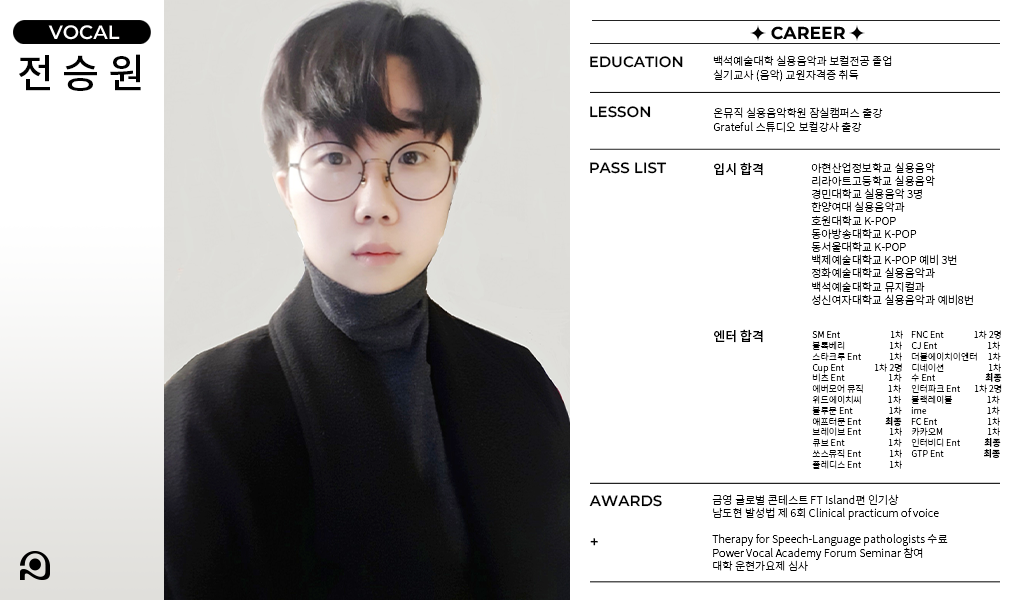
<style>
.page{position:relative;width:1020px;height:600px;background:#ffffff}
.page>*{position:absolute;margin:0}
.t1{font:19.4px "Montserrat-SemiBold";color:#fffefe}
.t2{font:17.3px "Montserrat-Bold";color:#000000}
.t3{font:39.9px "NotoSansKR-Medium";color:#000000}
.t4{font:15px "Montserrat-SemiBold";color:#000000}
.t5{font:11px/14px "NotoSansKR-Light";color:#000000}
.t6{font:13px "NotoSansKR-Medium";color:#000000}
.t7{font:11px "NotoSansKR-Light";color:#000000}
.t8{font:9px "NotoSansKR-Light";color:#000000}
.t9{font:9px "NotoSansKR-Bold";color:#000000}
</style>
<div class="page">
<p class="t1" style="left:48px;top:25px;width:72px;height:15px">VOCAL</p>
<p class="t2" style="left:771px;top:26px;width:74px;height:14px">CAREER</p>
<p class="t3" style="left:19px;top:54px;width:122px;height:37px">전 승 원</p>
<p class="t4" style="left:590px;top:56px;width:93px;height:12px">EDUCATION</p>
<p class="t5" style="left:713px;top:55px;width:179px;height:27px">백석예술대학 실용음악과 보컬전공 졸업<br>실기교사 (음악) 교원자격증 취득</p>
<p class="t4" style="left:590px;top:106px;width:61px;height:12px">LESSON</p>
<p class="t5" style="left:713px;top:107px;width:170px;height:26px">온뮤직 실용음악학원 잠실캠퍼스 출강<br>Grateful 스튜디오 보컬강사 출강</p>
<p class="t4" style="left:590px;top:162px;width:77px;height:12px">PASS LIST</p>
<p class="t6" style="left:714px;top:162px;width:49px;height:14px">입시 합격</p>
<p class="t7" style="left:811px;top:162px;width:162px;height:144px">아현산업정보학교 실용음악<br>리라아트고등학교 실용음악<br>경민대학교 실용음악 3명<br>한양여대 실용음악과<br>호원대학교 K-POP<br>동아방송대학교 K-POP<br>동서울대학교 K-POP<br>백제예술대학교 K-POP 예비 3번<br>정화예술대학교 실용음악과<br>백석예술대학교 뮤지컬과<br>성신여자대학교 실용음악과 예비8번</p>
<p class="t6" style="left:714px;top:329px;width:49px;height:14px">엔터 합격</p>
<p class="t8" style="left:812px;top:330px;width:91px;height:139px">SM Ent                         1차 <br>블록베리                      1차  <br>스타크루 Ent              1차 <br>Cup Ent               1차 2명<br>비츠 Ent                      1차  <br>에버모어 뮤직            1차  위드에이치씨             1차<br>블루문 Ent                  1차<br>애프터문 Ent            <span class="t9">최종 </span>브레이브 Ent              1차<br>큐브 Ent                      1차 <br>쏘스뮤직 Ent              1차<br>플레디스 Ent              1차</p>
<p class="t8" style="left:911px;top:330px;width:91px;height:128px">FNC Ent               1차 2명<br>CJ Ent                         1차  더블에이치이엔터     1차<br>디네이션                      1차 <br>수 Ent                         <span class="t9">최종</span> <br>인터파크 Ent       1차 2명<br>블랙레이블                 1차  <br>ime                              1차  <br>FC Ent                         1차 <br>카카오M                      1차<br>인터비디 Ent            <span class="t9">최종 <br></span>GTP Ent                    <span class="t9">최종</span></p>
<p class="t4" style="left:589px;top:495px;width:73px;height:12px">AWARDS</p>
<p class="t7" style="left:712px;top:494px;width:236px;height:77px">금영 글로벌 콘테스트 FT Island편 인기상<br>남도현 발성법 제 6회 Clinical practicum of voice<br><br>Therapy for Speech-Language pathologists 수료<br>Power Vocal Academy Forum Seminar 참여<br>대학 운현가요제 심사</p>
<p class="t4" style="left:590px;top:538px;width:8px;height:8px">+</p>
</div>
